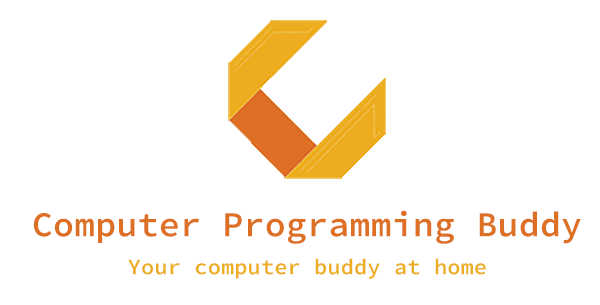
<style>
.page{position:relative;width:600px;height:305px;background:#ffffff}
.page>*{position:absolute;margin:0}
.t1{font:35px "SourceCodePro-Semibold";letter-spacing:0.005em;color:#de7025}
.t2{font:22px "SourceCodePro-Semibold";letter-spacing:0.005em;color:#edad20}
</style>
<div class="page">
<p class="t1" style="left:33px;top:210px;width:548px;height:34px">Computer Programming Buddy</p>
<p class="t2" style="left:128px;top:258px;width:358px;height:21px">Your computer buddy at home</p>
</div>
